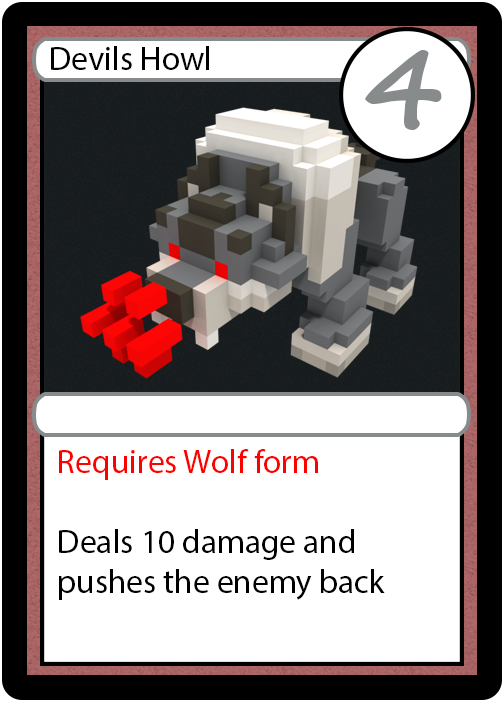
<style>
.page{position:relative;width:504px;height:702px;background:#ffffff}
.page>*{position:absolute;margin:0}
.t1{font:33.3px "MyriadPro-Regular";color:#000000}
.t2{font:111px "SegoeScript-Bold";color:#878b8c}
.t3{font:33.3px "MyriadPro-Regular";color:#ff0000}
</style>
<div class="page">
<p class="t1" style="left:51px;top:46px;width:158px;height:24px">Devils Howl</p>
<p class="t2" style="left:365px;top:50px;width:77px;height:80px">4</p>
<p class="t1" style="left:59px;top:449px;width:326px;height:151px"><span class="t3">Requires Wolf form<br><br></span>Deals 10 damage and<br>pushes the enemy back</p>
</div>
